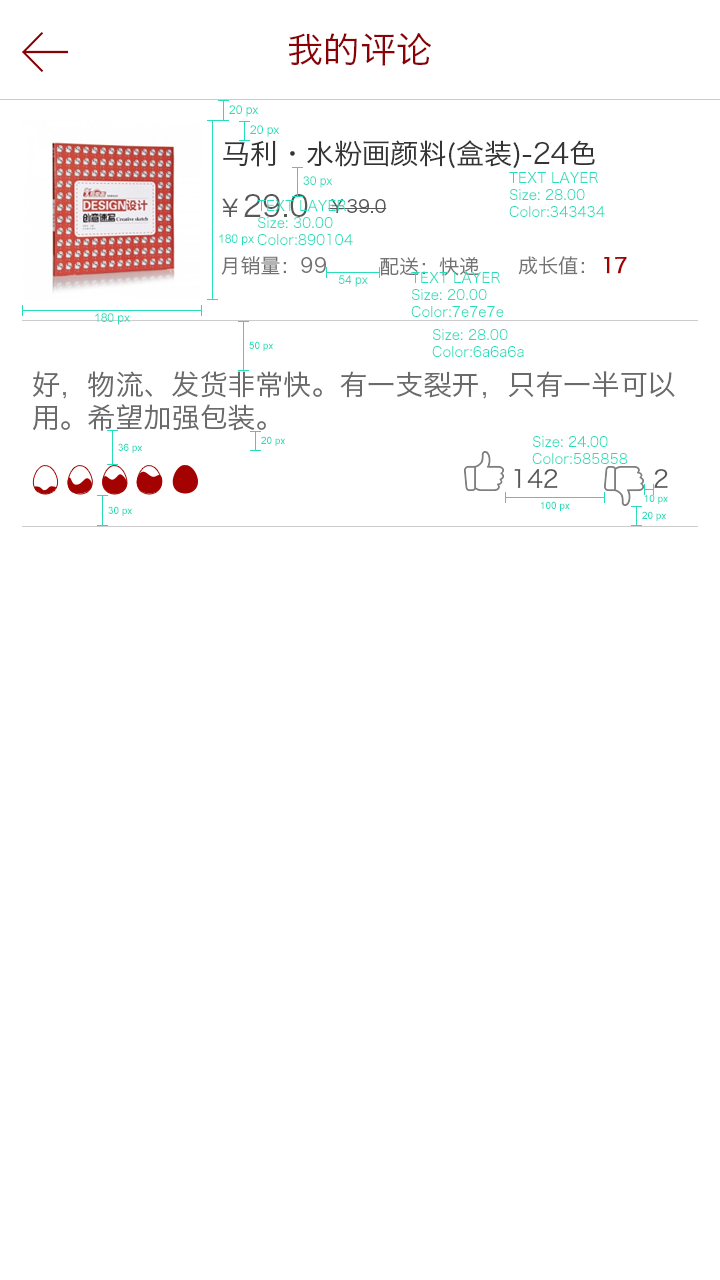
<style>
.page{position:relative;width:720px;height:1280px;background:#ffffff}
.page>*{position:absolute;margin:0}
.t1{font:36px "HiraginoSansGB-W3";color:#8a0105}
.t2{font:12px "ArialMT";color:#28ddb9}
.t3{font:28px "HiraginoSansGB-W3";color:#343434}
.t4{font:14px "HiraginoSansGB-W3";color:#28ddb9}
.t5{font:30px "HiraginoSansGB-W3";color:#585858}
.t6{font:24px "HiraginoSansGB-W3";color:#585858}
.t7{font:18px "HiraginoSansGB-W3";color:#585858}
.t8{font:20px "HiraginoSansGB-W3";color:#737373}
.t9{font:20px "HiraginoSansGB-W3";color:#a40101;font-weight:bold}
.t10{font:10px "ArialMT";color:#28ddb9}
.t11{font:28px "HiraginoSansGB-W3";color:#6a6a6a}
</style>
<div class="page">
<p class="t1" style="left:289px;top:33px;width:142px;height:33px">我的评论</p>
<p class="t2" style="left:229px;top:105px;width:30px;height:12px">20 px</p>
<p class="t2" style="left:250px;top:125px;width:30px;height:12px">20 px</p>
<p class="t3" style="left:223px;top:140px;width:372px;height:29px">马利·水粉画颜料(盒装)-24色</p>
<p class="t4" style="left:509px;top:172px;width:96px;height:45px">TEXT LAYER<br>Size: 28.00<br>Color:343434</p>
<p class="t2" style="left:303px;top:176px;width:30px;height:12px">30 px</p>
<p class="t5" style="left:222px;top:194px;width:86px;height:24px"><span class="t6">￥</span>29.0</p>
<p class="t4" style="left:257px;top:200px;width:96px;height:45px">TEXT LAYER<br>Size: 30.00<br>Color:890104</p>
<p class="t7" style="left:328px;top:199px;width:59px;height:14px">￥39.0</p>
<p class="t2" style="left:219px;top:234px;width:35px;height:12px">180 px</p>
<p class="t8" style="left:221px;top:256px;width:105px;height:19px">月销量：99</p>
<p class="t8" style="left:380px;top:257px;width:99px;height:19px">配送：快递</p>
<p class="t8" style="left:518px;top:256px;width:66px;height:19px">成长值：</p>
<p class="t9" style="left:604px;top:256px;width:23px;height:18px">17</p>
<p class="t2" style="left:338px;top:275px;width:30px;height:12px">54 px</p>
<p class="t4" style="left:411px;top:272px;width:93px;height:45px">TEXT LAYER<br>Size: 20.00<br>Color:7e7e7e</p>
<p class="t2" style="left:95px;top:313px;width:35px;height:12px">180 px</p>
<p class="t4" style="left:432px;top:329px;width:92px;height:28px">Size: 28.00<br>Color:6a6a6a</p>
<p class="t10" style="left:249px;top:341px;width:24px;height:10px">50 px</p>
<p class="t11" style="left:32px;top:371px;width:643px;height:60px">好，物流、发货非常快。有一支裂开，只有一半可以<br>用。希望加强包装。</p>
<p class="t10" style="left:261px;top:436px;width:24px;height:10px">20 px</p>
<p class="t4" style="left:532px;top:436px;width:96px;height:28px">Size: 24.00<br>Color:585858</p>
<p class="t10" style="left:118px;top:443px;width:24px;height:10px">36 px</p>
<p class="t6" style="left:514px;top:469px;width:44px;height:20px">142</p>
<p class="t6" style="left:654px;top:469px;width:14px;height:20px">2</p>
<p class="t10" style="left:644px;top:494px;width:24px;height:10px">10 px</p>
<p class="t10" style="left:108px;top:506px;width:24px;height:10px">30 px</p>
<p class="t10" style="left:541px;top:501px;width:29px;height:10px">100 px</p>
<p class="t10" style="left:642px;top:511px;width:24px;height:10px">20 px</p>
</div>
